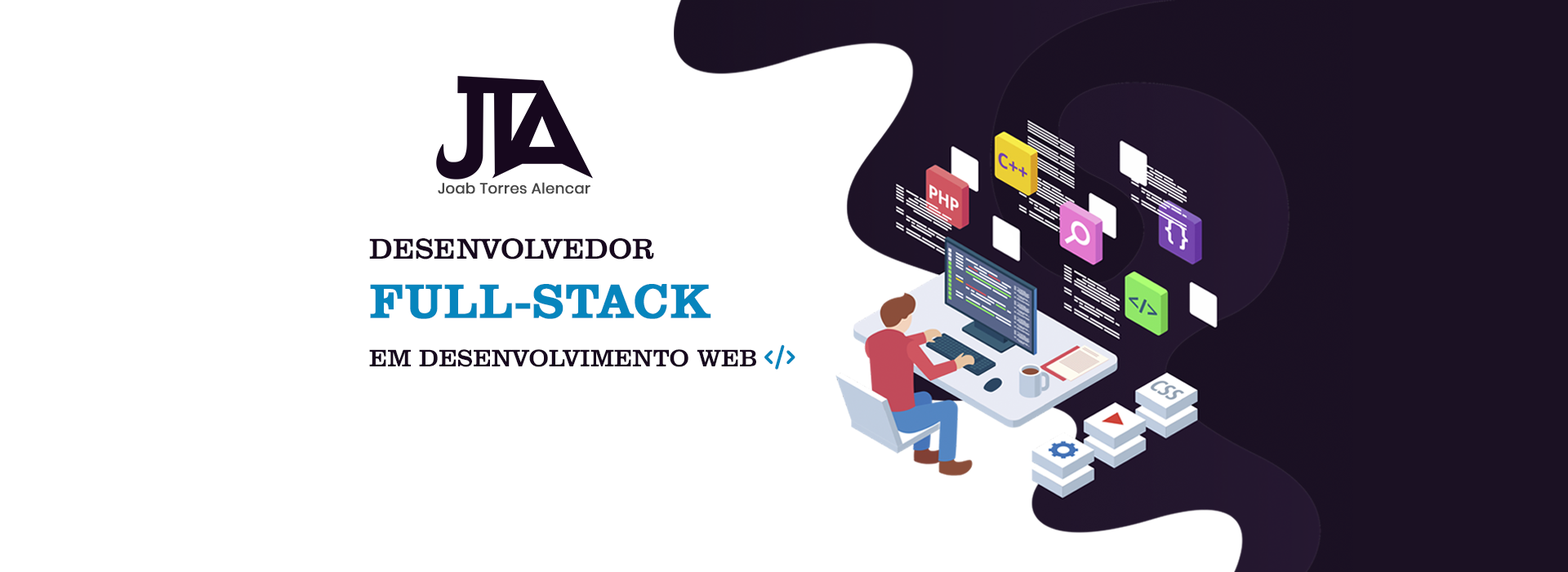
<style>
.page{position:relative;width:1568px;height:572px;background:#ffffff}
.page>*{position:absolute;margin:0}
.t1{font:14.7px "Poppins-Regular";color:#444444;font-weight:bold}
.t2{font:24.5px/49px "ClarendonBT-Roman";color:#17081e}
.t3{font:29.4px/58.8px "ClarendonBT-Roman";color:#17081e}
.t4{font:49px/58.8px "ClarendonBT-Roman";color:#0685bd;font-weight:bold}
.t5{font:24.5px/49px "FontAwesome6Free-Solid";color:#0685bd}
</style>
<div class="page">
<p class="t1" style="left:438px;top:182px;width:152px;height:12px">Joab Torres Alencar</p>
<p class="t2" style="left:369px;top:238px;width:426px;height:132px"><span class="t3">DESENVOLVEDOR<br></span><span class="t4">FULL-STACK<br></span>EM DESENVOLVIMENTO WEB <span class="t5">CODE</span></p>
</div>
